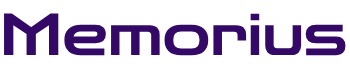
<style>
.page{position:relative;width:350px;height:70px;background:#ffffff}
.page>*{position:absolute;margin:0}
.t1{font:58px "ZenDots-Regular";color:#330867}
</style>
<div class="page">
<p class="t1" style="left:4px;top:13px;width:342px;height:43px">Memorius</p>
</div>
